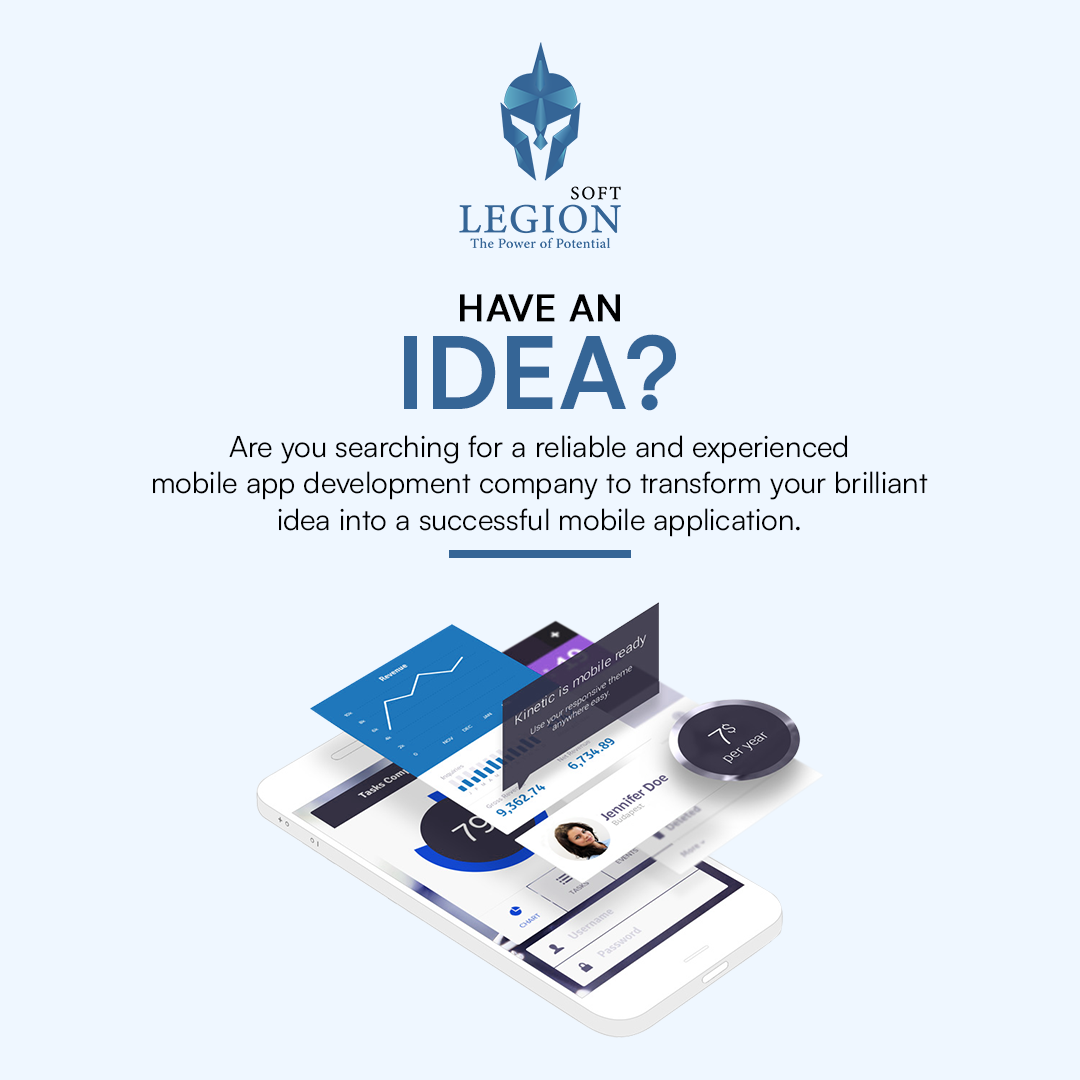
<style>
.page{position:relative;width:1080px;height:1080px;background:#eff7ff}
.page>*{position:absolute;margin:0}
.t1{font:37px "Satoshi-Medium";letter-spacing:0.015em;color:#000000;text-transform:uppercase;font-weight:bold}
.t2{font:100px "Satoshi-Bold";color:#356596;text-transform:uppercase}
.t3{font:29.4px/36.3px "Satoshi-Regular";color:#000000}
</style>
<div class="page">
<p class="t1" style="left:460px;top:294px;width:160px;height:28px">Have an</p>
<p class="t2" style="left:404px;top:334px;width:272px;height:77px">Idea?</p>
<p class="t3" style="left:153px;top:435px;width:775px;height:102px;text-align:center">Are you searching for a reliable and experienced<br>mobile app development company to transform your brilliant<br>idea into a successful mobile application.</p>
</div>
